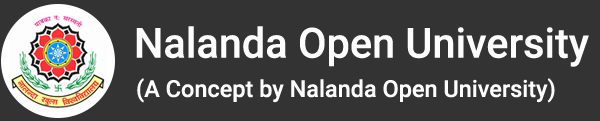
<style>
.page{position:relative;width:600px;height:121px;background:#333333}
.page>*{position:absolute;margin:0}
.t1{font:41.7px "Roboto-Medium";color:#fdfdfd}
.t2{font:23.5px "Roboto-Medium";color:#fdfdfd}
</style>
<div class="page">
<p class="t1" style="left:136px;top:26px;width:453px;height:41px">Nalanda Open University</p>
<p class="t2" style="left:137px;top:78px;width:418px;height:25px">(A Concept by Nalanda Open University)</p>
</div>
